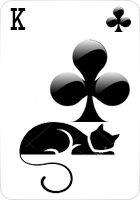
<style>
.page{position:relative;width:140px;height:200px;background:#ffffff}
.page>*{position:absolute;margin:0}
.t1{font:26px "CardCharacters";color:#010101}
</style>
<div class="page">
<p class="t1" style="left:10px;top:8px;width:16px;height:22px">K</p>
</div>
